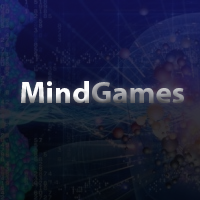
<style>
.page{position:relative;width:200px;height:200px}
.page>*{position:absolute;margin:0}
.t1{font:31px "MyriadPro-Bold";color:#98989d}
.t2{font:31px "MyriadPro-Bold";color:#fcfcfe}
</style>
<div class="page">
<p class="t1" style="left:21px;top:81px;width:163px;height:22px"><span class="t2">Mind</span>Games</p>
</div>
